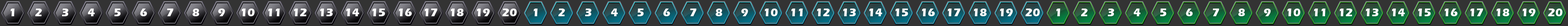
<style>
.page{position:relative;width:1568px;height:26px}
.page>*{position:absolute;margin:0}
.t1{font:11.4px "ErasITC-Bold";color:#ffffff}
</style>
<div class="page">
<p class="t1" style="left:11px;top:9px;width:4px;height:7px">1</p>
<p class="t1" style="left:35px;top:9px;width:7px;height:7px">2</p>
<p class="t1" style="left:62px;top:9px;width:7px;height:7px">3</p>
<p class="t1" style="left:88px;top:9px;width:7px;height:7px">4</p>
<p class="t1" style="left:114px;top:9px;width:7px;height:7px">5</p>
<p class="t1" style="left:140px;top:9px;width:7px;height:7px">6</p>
<p class="t1" style="left:167px;top:9px;width:7px;height:7px">7</p>
<p class="t1" style="left:192px;top:9px;width:7px;height:7px">8</p>
<p class="t1" style="left:218px;top:9px;width:7px;height:7px">9</p>
<p class="t1" style="left:242px;top:9px;width:13px;height:7px">10</p>
<p class="t1" style="left:268px;top:9px;width:12px;height:7px">11</p>
<p class="t1" style="left:294px;top:9px;width:13px;height:7px">12</p>
<p class="t1" style="left:320px;top:9px;width:13px;height:7px">13</p>
<p class="t1" style="left:346px;top:9px;width:13px;height:7px">14</p>
<p class="t1" style="left:372px;top:9px;width:13px;height:7px">15</p>
<p class="t1" style="left:399px;top:9px;width:13px;height:7px">16</p>
<p class="t1" style="left:425px;top:9px;width:12px;height:7px">17</p>
<p class="t1" style="left:451px;top:9px;width:12px;height:7px">18</p>
<p class="t1" style="left:477px;top:9px;width:13px;height:7px">19</p>
<p class="t1" style="left:502px;top:9px;width:15px;height:7px">20</p>
</div>
